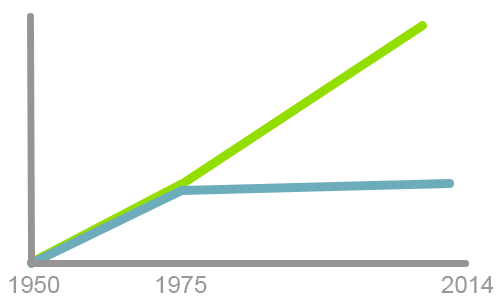
<style>
.page{position:relative;width:500px;height:300px;background:#ffffff}
.page>*{position:absolute;margin:0}
.t1{font:24px "ArialMT";color:#999999}
</style>
<div class="page">
<p class="t1" style="left:9px;top:276px;width:51px;height:17px">1950</p>
<p class="t1" style="left:156px;top:276px;width:51px;height:17px">1975</p>
<p class="t1" style="left:441px;top:276px;width:53px;height:17px">2014</p>
</div>
